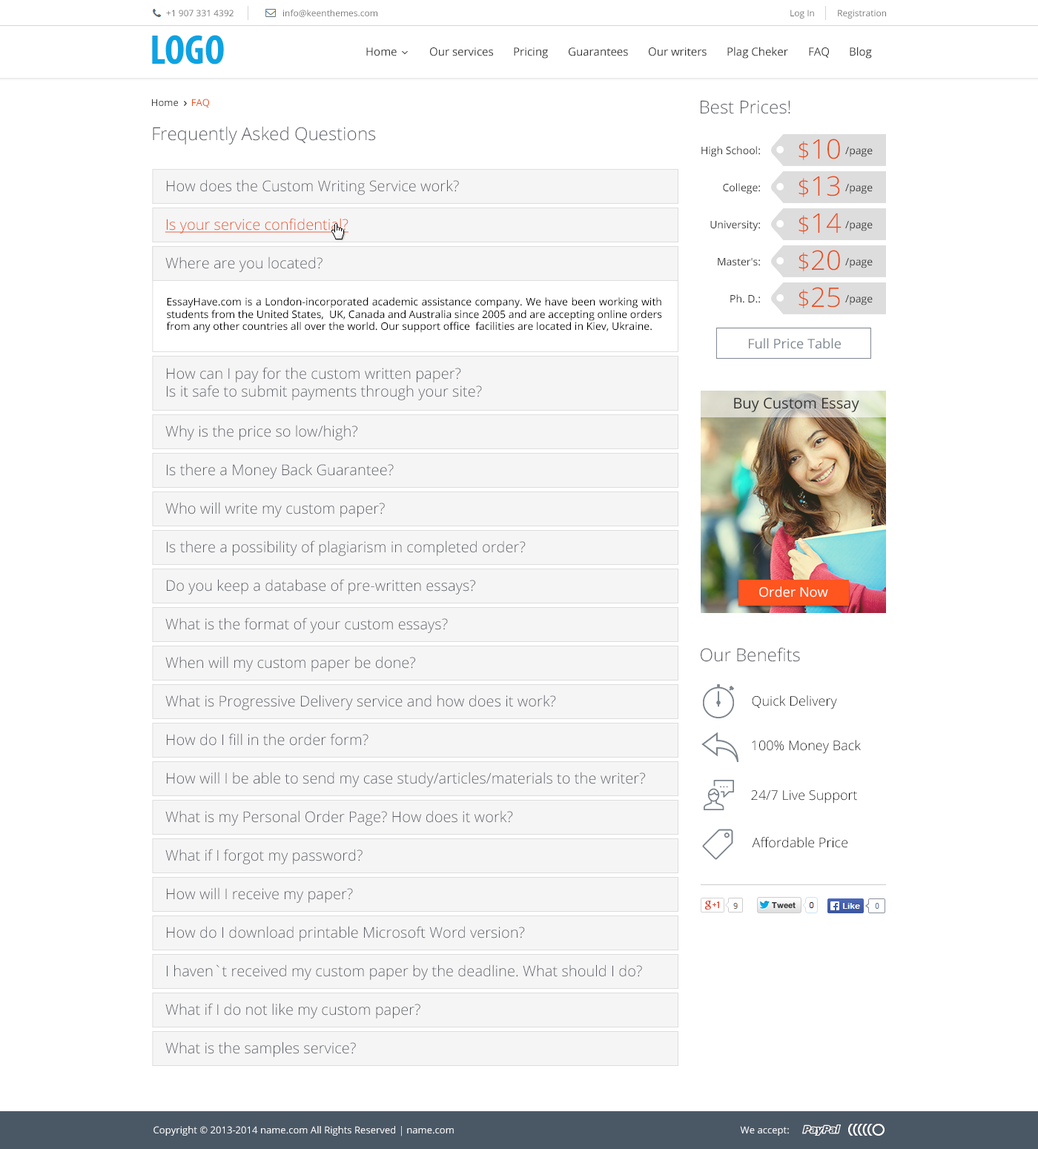
<style>
.page{position:relative;width:1038px;height:1149px;background:#ffffff}
.page>*{position:absolute;margin:0}
.t1{font:8.9px "OpenSans";color:#737373}
.t2{font:41.9px "MyriadPro-BoldCond";color:#0da3e2}
.t3{font:11.1px "OpenSans";color:#333333}
.t4{font:9.6px "OpenSans";color:#333333}
.t5{font:9.6px "OpenSans";color:#e84d1c}
.t6{font:17.8px "OpenSans-Light";color:#5a5d66}
.t7{font:10.4px "OpenSans";color:#333333}
.t8{font:27px "OpenSans-Light";color:#e84d1c}
.t9{font:23px "OpenSans-Light";color:#e84d1c}
.t10{font:14.8px "OpenSans-Light";color:#5a5d66}
.t11{font:14.8px "OpenSans-Light";color:#e84d1c;text-decoration:underline}
.t12{font:10.4px "OpenSans";color:#000000}
.t13{font:13.3px "OpenSans";color:#7c858e}
.t14{font:13.3px "OpenSans-Light";color:#000000}
</style>
<div class="page">
<p class="t1" style="left:166px;top:10px;width:68px;height:6px">+1 907 331 4392</p>
<p class="t1" style="left:283px;top:10px;width:94px;height:7px">info@keenthemes.com</p>
<p class="t1" style="left:790px;top:10px;width:24px;height:9px">Log In</p>
<p class="t1" style="left:838px;top:10px;width:48px;height:9px">Registration</p>
<p class="t2" style="left:152px;top:35px;width:72px;height:29px">LOGO</p>
<p class="t3" style="left:366px;top:47px;width:31px;height:9px">Home</p>
<p class="t3" style="left:430px;top:47px;width:63px;height:9px">Our services</p>
<p class="t3" style="left:514px;top:47px;width:34px;height:12px">Pricing</p>
<p class="t3" style="left:569px;top:47px;width:59px;height:9px">Guarantees</p>
<p class="t3" style="left:649px;top:47px;width:57px;height:9px">Our writers</p>
<p class="t3" style="left:727px;top:47px;width:61px;height:12px">Plag Cheker</p>
<p class="t3" style="left:809px;top:47px;width:20px;height:11px">FAQ</p>
<p class="t3" style="left:850px;top:47px;width:22px;height:12px">Blog</p>
<p class="t4" style="left:152px;top:99px;width:57px;height:9px">Home     <span class="t5">FAQ</span></p>
<p class="t6" style="left:701px;top:100px;width:89px;height:14px">Best Prices!</p>
<p class="t6" style="left:153px;top:126px;width:223px;height:19px">Frequently Asked Questions</p>
<p class="t7" style="left:701px;top:146px;width:59px;height:11px">High School:</p>
<p class="t8" style="left:798px;top:139px;width:42px;height:21px"><span class="t9">$</span>10</p>
<p class="t7" style="left:845px;top:147px;width:27px;height:10px">/page</p>
<p class="t10" style="left:167px;top:179px;width:292px;height:16px">How does the Custom Writing Service work?</p>
<p class="t7" style="left:723px;top:183px;width:37px;height:11px">College:</p>
<p class="t8" style="left:798px;top:176px;width:42px;height:21px"><span class="t9">$</span>13</p>
<p class="t7" style="left:845px;top:184px;width:27px;height:10px">/page</p>
<p class="t11" style="left:165px;top:218px;width:183px;height:16px">Is your service confidential?</p>
<p class="t7" style="left:710px;top:220px;width:50px;height:11px">University:</p>
<p class="t8" style="left:798px;top:213px;width:43px;height:21px"><span class="t9">$</span>14</p>
<p class="t7" style="left:845px;top:221px;width:27px;height:10px">/page</p>
<p class="t10" style="left:165px;top:256px;width:157px;height:16px">Where are you located?</p>
<p class="t7" style="left:718px;top:258px;width:42px;height:8px">Master's:</p>
<p class="t8" style="left:798px;top:250px;width:42px;height:21px"><span class="t9">$</span>20</p>
<p class="t7" style="left:845px;top:258px;width:27px;height:10px">/page</p>
<p class="t8" style="left:798px;top:287px;width:42px;height:21px"><span class="t9">$</span>25</p>
<p class="t12" style="left:166px;top:297px;width:496px;height:36px;text-align:justify">EssayHave.com is a London-incorporated academic assistance company. We have been working with students from the United States,  UK, Canada and Australia since 2005 and are accepting online orders from any other countries all over the world. Our support office  facilities are located in Kiev, Ukraine.</p>
<p class="t7" style="left:730px;top:294px;width:30px;height:9px">Ph. D.:</p>
<p class="t7" style="left:845px;top:295px;width:27px;height:10px">/page</p>
<p class="t13" style="left:749px;top:338px;width:92px;height:11px">Full Price Table</p>
<p class="t10" style="left:167px;top:367px;width:315px;height:33px">How can I pay for the custom written paper? <br>Is it safe to submit payments through your site?</p>
<p class="t10" style="left:165px;top:425px;width:192px;height:15px">Why is the price so low/high?</p>
<p class="t10" style="left:167px;top:463px;width:227px;height:16px">Is there a Money Back Guarantee?</p>
<p class="t10" style="left:165px;top:502px;width:220px;height:15px">Who will write my custom paper?</p>
<p class="t10" style="left:167px;top:540px;width:359px;height:16px">Is there a possibility of plagiarism in completed order?</p>
<p class="t10" style="left:167px;top:579px;width:308px;height:16px">Do you keep a database of pre-written essays?</p>
<p class="t10" style="left:165px;top:617px;width:283px;height:16px">What is the format of your custom essays?</p>
<p class="t6" style="left:701px;top:647px;width:99px;height:15px">Our Benefits</p>
<p class="t10" style="left:165px;top:656px;width:250px;height:16px">When will my custom paper be done?</p>
<p class="t10" style="left:165px;top:695px;width:391px;height:15px">What is Progressive Delivery service and how does it work?</p>
<p class="t14" style="left:752px;top:695px;width:85px;height:14px">Quick Delivery</p>
<p class="t10" style="left:167px;top:733px;width:201px;height:13px">How do I fill in the order form?</p>
<p class="t14" style="left:752px;top:740px;width:109px;height:14px">100% Money Back</p>
<p class="t10" style="left:167px;top:772px;width:478px;height:15px">How will I be able to send my case study/articles/materials to the writer?</p>
<p class="t14" style="left:751px;top:790px;width:106px;height:14px">24/7 Live Support</p>
<p class="t10" style="left:165px;top:810px;width:348px;height:16px">What is my Personal Order Page? How does it work?</p>
<p class="t14" style="left:752px;top:837px;width:95px;height:11px">Affordable Price</p>
<p class="t10" style="left:165px;top:849px;width:197px;height:15px">What if I forgot my password?</p>
<p class="t10" style="left:167px;top:887px;width:186px;height:16px">How will I receive my paper?</p>
<p class="t10" style="left:167px;top:926px;width:358px;height:15px">How do I download printable Microsoft Word version?</p>
<p class="t10" style="left:167px;top:964px;width:475px;height:16px">I haven`t received my custom paper by the deadline. What should I do?</p>
<p class="t10" style="left:165px;top:1003px;width:255px;height:16px">What if I do not like my custom paper?</p>
<p class="t10" style="left:165px;top:1042px;width:191px;height:15px">What is the samples service?</p>
</div>
